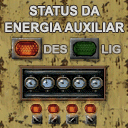
<style>
.page{position:relative;width:128px;height:128px}
.page>*{position:absolute;margin:0}
.t1{font:13px/16.6px "Arial-BoldMT";letter-spacing:0.007em;color:#dededa;scale:0.96 1}
.t2{font:11.2px "Arial-BoldMT";letter-spacing:0.007em;color:#cacaca;font-weight:bold}
</style>
<div class="page">
<p class="t1" style="left:5px;top:5px;width:119px;height:28px;text-align:center">STATUS DA<br>ENERGIA AUXILIAR</p>
<p class="t2" style="left:44px;top:45px;width:23px;height:9px;opacity:0.8">DES</p>
<p class="t2" style="left:102px;top:45px;width:19px;height:9px;opacity:0.8">LIG</p>
</div>
